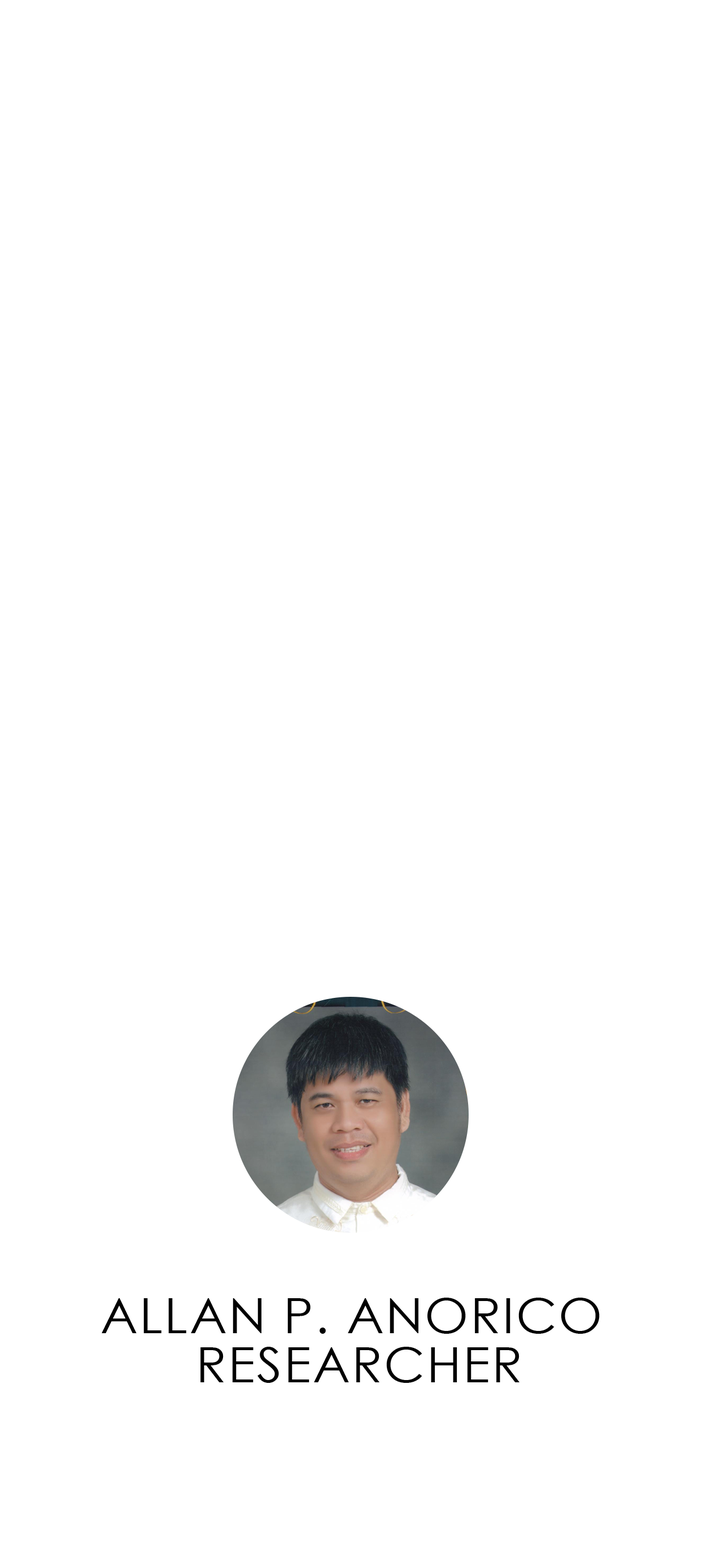
<style>
.page{position:relative;width:725px;height:1568px;background:#ffffff}
.page>*{position:absolute;margin:0}
.t1{font:49.2px "CenturyGothic";letter-spacing:0.04em;color:#000000;text-transform:uppercase}
</style>
<div class="page">
<p class="t1" style="left:102px;top:1298px;width:497px;height:85px;text-align:center">ALLAN P. ANORICO <br>RESEARCHER</p>
</div>
